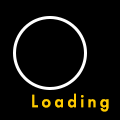
<style>
.page{position:relative;width:120px;height:120px;background:#000000}
.page>*{position:absolute;margin:0}
.t1{font:16.2px "Futura-Medium";letter-spacing:0.2em;color:#ffcc00}
</style>
<div class="page">
<p class="t1" style="left:32px;top:93px;width:77px;height:19px">Loading</p>
</div>
